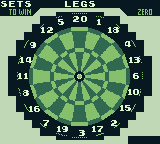
<style>
.page{position:relative;width:160px;height:144px;background:#071821}
.page>*{position:absolute;margin:0}
.t1{font:8px "Early-GameBoy";color:#e0f8cf}
.t2{font:8px "Early-GameBoy";letter-spacing:-0.12em;color:#e0f8cf}
.t3{font:8px "Early-GameBoy";letter-spacing:-0.24em;color:#e0f8cf}
.t4{font:8px "Early-GameBoy";letter-spacing:-0.18em;color:#e0f8cf}
.t5{font:8px "Early-GameBoy";letter-spacing:-0.34em;color:#e0f8cf}
</style>
<div class="page">
<p class="t1" style="left:1px;top:1px;width:30px;height:6px">sets</p>
<p class="t1" style="left:65px;top:1px;width:30px;height:6px">Legs</p>
<p class="t2" style="left:73px;top:16px;width:14px;height:6px">20</p>
<p class="t2" style="left:41px;top:27px;width:12px;height:6px">12</p>
<p class="t1" style="left:58px;top:19px;width:6px;height:6px">5</p>
<p class="t3" style="left:97px;top:19px;width:4px;height:6px">1</p>
<p class="t3" style="left:108px;top:27px;width:11px;height:6px">18</p>
<p class="t3" style="left:125px;top:41px;width:6px;height:6px">4</p>
<p class="t1" style="left:30px;top:42px;width:6px;height:6px">9</p>
<p class="t4" style="left:20px;top:57px;width:12px;height:6px">14</p>
<p class="t3" style="left:129px;top:57px;width:11px;height:6px">13</p>
<p class="t5" style="left:18px;top:73px;width:10px;height:6px">11</p>
<p class="t3" style="left:133px;top:73px;width:6px;height:6px">6</p>
<p class="t3" style="left:128px;top:89px;width:11px;height:6px">10</p>
<p class="t2" style="left:23px;top:90px;width:6px;height:6px">8</p>
<p class="t3" style="left:29px;top:106px;width:11px;height:6px">16</p>
<p class="t3" style="left:120px;top:105px;width:11px;height:6px">15</p>
<p class="t3" style="left:43px;top:120px;width:6px;height:6px">7</p>
<p class="t3" style="left:57px;top:126px;width:11px;height:6px">19</p>
<p class="t3" style="left:92px;top:126px;width:11px;height:6px">17</p>
<p class="t3" style="left:111px;top:120px;width:6px;height:6px">2</p>
<p class="t3" style="left:79px;top:130px;width:6px;height:6px">3</p>
</div>
